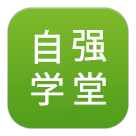
<style>
.page{position:relative;width:136px;height:136px;background:#ffffff}
.page>*{position:absolute;margin:0}
.t1{font:36px "SourceHanSansCN-Regular";color:#ffffff;font-weight:bold}
</style>
<div class="page">
<p class="t1" style="left:34px;top:29px;width:26px;height:35px">自</p>
<p class="t1" style="left:72px;top:30px;width:35px;height:32px">强</p>
<p class="t1" style="left:31px;top:72px;width:33px;height:34px">学</p>
<p class="t1" style="left:74px;top:72px;width:32px;height:33px">堂</p>
</div>
